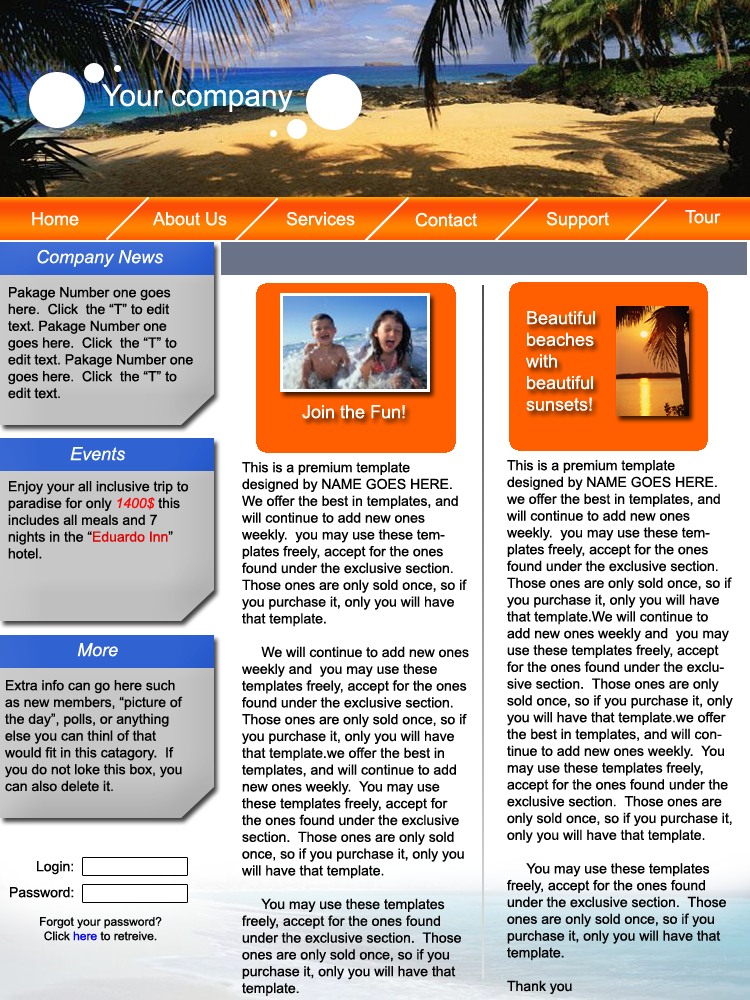
<style>
.page{position:relative;width:750px;height:1000px;background:#ffffff}
.page>*{position:absolute;margin:0}
.t1{font:30px "ArialMT";color:#ffffff}
.t2{font:18px "ArialMT";color:#ffffff}
.t3{font:18px "Arial-ItalicMT";color:#ffffff}
.t4{font:14px "ArialMT";color:#000000}
.t5{font:14px "Arial-ItalicMT";color:#ff0000}
.t6{font:14px "ArialMT";color:#e00000}
.t7{font:12px "ArialMT";color:#000000}
.t8{font:12px "ArialMT";color:#0000ff}
</style>
<div class="page">
<p class="t1" style="left:102px;top:84px;width:191px;height:29px">Your company</p>
<p class="t2" style="left:32px;top:212px;width:47px;height:14px">Home</p>
<p class="t2" style="left:152px;top:212px;width:75px;height:14px">About Us</p>
<p class="t2" style="left:286px;top:211px;width:69px;height:15px">Services</p>
<p class="t2" style="left:415px;top:212px;width:62px;height:15px">Contact</p>
<p class="t2" style="left:546px;top:211px;width:63px;height:18px">Support</p>
<p class="t2" style="left:685px;top:210px;width:36px;height:14px">Tour</p>
<p class="t3" style="left:37px;top:249px;width:127px;height:18px">Company News</p>
<p class="t4" style="left:8px;top:287px;width:185px;height:112px">Pakage Number one goes here.  Click  the “T” to edit text. Pakage Number one goes here.  Click  the “T” to edit text. Pakage Number one goes here.  Click  the “T” to edit text.</p>
<p class="t3" style="left:70px;top:447px;width:56px;height:14px">Events</p>
<p class="t4" style="left:242px;top:462px;width:227px;height:534px">This is a premium template designed by NAME GOES HERE.  We offer the best in templates, and will continue to add new ones weekly.  you may use these templates freely, accept for the ones found under the exclusive section.  Those ones are only sold once, so if you purchase it, only you will have that template.  <br><br>     We will continue to add new ones weekly and  you may use these templates freely, accept for the ones found under the exclusive section.  Those ones are only sold once, so if you purchase it, only you will have that template.we offer the best in templates, and will continue to add new ones weekly.  You may use these templates freely, accept for the ones found under the exclusive section.  Those ones are only sold once, so if you purchase it, only you will have that template.<br><br>     You may use these templates freely, accept for the ones found under the exclusive section.  Those ones are only sold once, so if you purchase it, only you will have that template.</p>
<p class="t4" style="left:507px;top:460px;width:226px;height:534px">This is a premium template designed by NAME GOES HERE.  we offer the best in templates, and will continue to add new ones weekly.  you may use these templates freely, accept for the ones found under the exclusive section.  Those ones are only sold once, so if you purchase it, only you will have that template.We will continue to add new ones weekly and  you may use these templates freely, accept for the ones found under the exclusive section.  Those ones are only sold once, so if you purchase it, only you will have that template.we offer the best in templates, and will continue to add new ones weekly.  You may use these templates freely, accept for the ones found under the exclusive section.  Those ones are only sold once, so if you purchase it, only you will have that template.<br><br>     You may use these templates freely, accept for the ones found under the exclusive section.  Those ones are only sold once, so if you purchase it, only you will have that template.<br><br>Thank you</p>
<p class="t4" style="left:8px;top:481px;width:181px;height:78px">Enjoy your all inclusive trip to paradise for only <span class="t5">1400$</span> this includes all meals and 7 nights in the “<span class="t6">Eduardo Inn</span>” hotel.</p>
<p class="t3" style="left:77px;top:643px;width:41px;height:14px">More</p>
<p class="t4" style="left:5px;top:679px;width:178px;height:113px">Extra info can go here such as new members, “picture of the day”, polls, or anything else you can thinl of that would fit in this catagory.  If you do not loke this box, you can also delete it.</p>
<p class="t4" style="left:37px;top:861px;width:36px;height:14px">Login:</p>
<p class="t4" style="left:10px;top:887px;width:64px;height:11px">Password:</p>
<p class="t7" style="left:40px;top:916px;width:122px;height:25px;text-align:center">Forgot your password? <br>Click <span class="t8">here</span> to retreive.</p>
</div>
